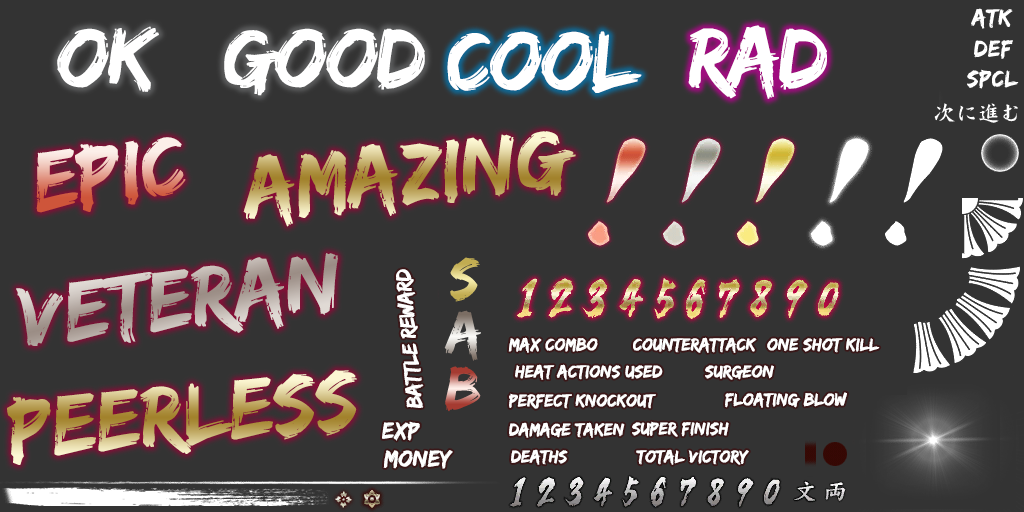
<style>
.page{position:relative;width:1024px;height:512px;background:#333333}
.page>*{position:absolute;margin:0}
.t1{font:24px "EdoSZ";letter-spacing:0.03em;color:#ffffff}
.t2{font:88px "EdoSZ";letter-spacing:-0.025em;color:#ffffff}
.t3{font:88px "EdoSZ"}
.t4{font:60px "EdoSZ";letter-spacing:0.03em}
.t5{font:22px "EdoSZ";letter-spacing:-0.025em;color:#ffffff}
.t6{font:18px "EdoSZ";color:#ffffff}
.t7{font:24px "EdoSZ";color:#ffffff}
</style>
<div class="page">
<p class="t1" style="left:971px;top:8px;width:42px;height:21px">ATK</p>
<p class="t2" style="left:57px;top:26px;width:102px;height:66px">OK</p>
<p class="t2" style="left:224px;top:28px;width:201px;height:68px">GOOD</p>
<p class="t2" style="left:688px;top:25px;width:139px;height:74px">RAD</p>
<p class="t2" style="left:447px;top:31px;width:195px;height:62px">COOL</p>
<p class="t1" style="left:974px;top:40px;width:39px;height:19px">DEF</p>
<p class="t1" style="left:967px;top:69px;width:52px;height:20px">SPCL</p>
<p class="t3" style="left:36px;top:137px;width:150px;height:76px;rotate:-7deg">epic</p>
<p class="t3" style="left:243px;top:131px;width:333px;height:96px;rotate:-6deg">amazing</p>
<p class="t3" style="left:16px;top:253px;width:322px;height:93px;rotate:-7deg">VETERAN</p>
<p class="t4" style="left:450px;top:257px;width:30px;height:45px">s</p>
<p class="t5" style="left:396px;top:269px;width:28px;height:139px;rotate:-95deg">battle reward</p>
<p class="t4" style="left:444px;top:310px;width:37px;height:51px">a</p>
<p class="t6" style="left:508px;top:337px;width:90px;height:16px">MAX COMBO</p>
<p class="t6" style="left:633px;top:337px;width:124px;height:16px">counterattack</p>
<p class="t6" style="left:767px;top:338px;width:113px;height:15px">one shot kill</p>
<p class="t4" style="left:445px;top:366px;width:36px;height:46px">b</p>
<p class="t6" style="left:515px;top:364px;width:148px;height:16px">heat actions used</p>
<p class="t6" style="left:705px;top:365px;width:69px;height:15px">surgeon</p>
<p class="t3" style="left:7px;top:370px;width:350px;height:95px;rotate:-5deg">peerless</p>
<p class="t6" style="left:509px;top:393px;width:147px;height:16px">perfect knockout</p>
<p class="t6" style="left:725px;top:392px;width:122px;height:16px">FLOATING BLOW</p>
<p class="t7" style="left:382px;top:421px;width:38px;height:20px">exp</p>
<p class="t6" style="left:509px;top:422px;width:116px;height:16px">DAMAGE TAKEN</p>
<p class="t6" style="left:632px;top:421px;width:97px;height:16px">super finish</p>
<p class="t6" style="left:511px;top:449px;width:57px;height:16px">deaths</p>
<p class="t6" style="left:636px;top:449px;width:113px;height:16px">total victory</p>
<p class="t7" style="left:383px;top:450px;width:70px;height:19px">money</p>
</div>
